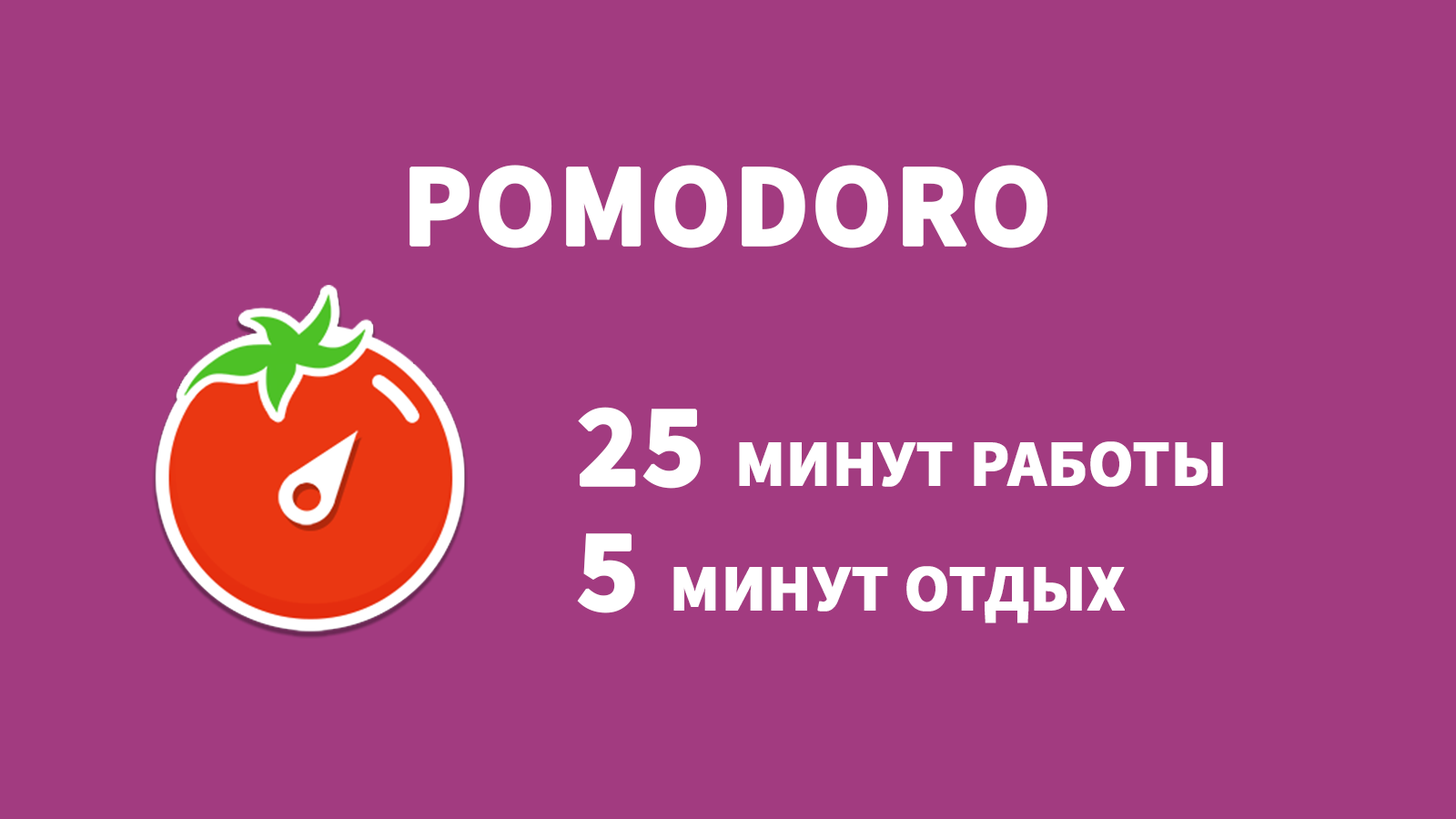
<style>
.page{position:relative;width:1456px;height:819px;background:#a23b80}
.page>*{position:absolute;margin:0}
.t1{font:117.4px "SourceSansPro-Bold";color:#ffffff;text-transform:uppercase;font-weight:bold}
.t2{font:65.5px "SourceSansPro-Bold";color:#ffffff;text-transform:uppercase;font-weight:bold}
</style>
<div class="page">
<p class="t1" style="left:409px;top:165px;width:639px;height:83px">pomodoro</p>
<p class="t2" style="left:578px;top:407px;width:645px;height:82px"><span class="t1">25 </span>минут работы</p>
<p class="t2" style="left:577px;top:533px;width:548px;height:90px"><span class="t1">5 </span>минут отдых</p>
</div>
